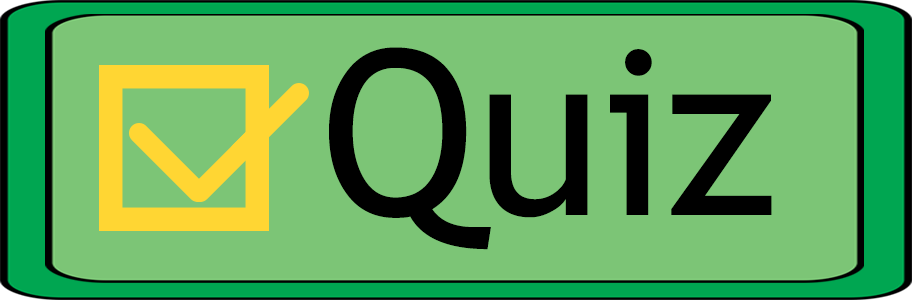
<style>
.page{position:relative;width:912px;height:300px;background:#7cc576}
.page>*{position:absolute;margin:0}
.t1{font:230px "TrebuchetMS";color:#000000}
</style>
<div class="page">
<p class="t1" style="left:329px;top:47px;width:443px;height:203px">Quiz</p>
</div>
